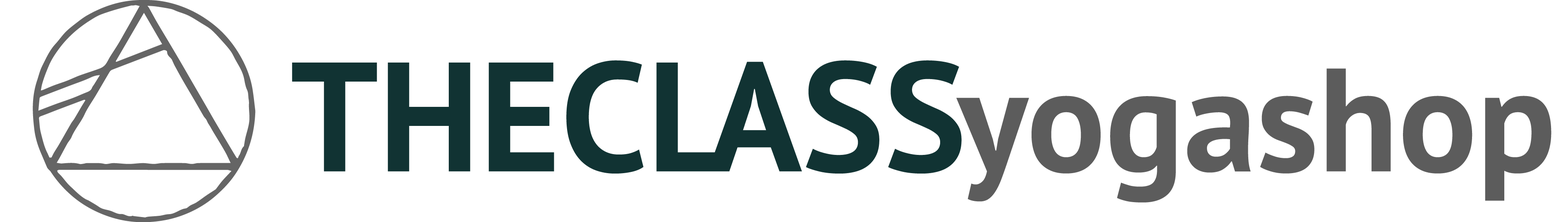
<style>
.page{position:relative;width:1568px;height:222px;background:#ffffff}
.page>*{position:absolute;margin:0}
.t1{font:155.1px "PTSans-Bold";color:#113333}
.t2{font:120.6px "PTSans-Bold";color:#113333}
.t3{font:146.5px "PTSans-Bold";color:#5c5c5c}
</style>
<div class="page">
<p class="t1" style="left:292px;top:60px;width:670px;height:113px"><span class="t2"> </span>THECLASS</p>
<p class="t3" style="left:956px;top:68px;width:595px;height:134px">yogashop</p>
</div>
